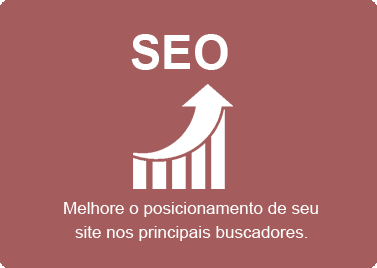
<style>
.page{position:relative;width:377px;height:268px;background:#a45c5c}
.page>*{position:absolute;margin:0}
.t1{font:47.4px "Arial-BoldMT";color:#ffffff}
.t2{font:16.9px "ArialMT";color:#ffffff}
</style>
<div class="page">
<p class="t1" style="left:131px;top:34px;width:97px;height:36px">SEO</p>
<p class="t2" style="left:64px;top:202px;width:254px;height:15px">Melhore o posicionamento de seu</p>
<p class="t2" style="left:75px;top:226px;width:233px;height:15px">site nos principais buscadores.</p>
</div>
